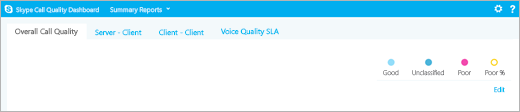
<style>
.page{position:relative;width:520px;height:112px;background:#ffffff}
.page>*{position:absolute;margin:0}
.t1{font:6.4px "SegoeUI";color:#beedff}
.t2{font:6.7px "SegoeUI";color:#beedff}
.t3{font:7.5px "SegoeUI";color:#737373}
.t4{font:7.5px "SegoeUI";color:#00bcf2}
.t5{font:6.7px "SegoeUI-Light";color:#737376}
.t6{font:6.7px "SegoeUI-Semilight";color:#00bcf2}
</style>
<div class="page">
<p class="t1" style="left:16px;top:7px;width:83px;height:7px">Skype Call Quality Dashboard</p>
<p class="t2" style="left:110px;top:7px;width:52px;height:7px">Summary Reports</p>
<p class="t3" style="left:15px;top:28px;width:63px;height:8px">Overall Call Quality</p>
<p class="t4" style="left:95px;top:29px;width:47px;height:7px">Server - Client</p>
<p class="t4" style="left:159px;top:29px;width:45px;height:7px">Client - Client</p>
<p class="t4" style="left:221px;top:28px;width:58px;height:8px">Voice Quality SLA</p>
<p class="t5" style="left:383px;top:69px;width:16px;height:7px">Good</p>
<p class="t5" style="left:412px;top:69px;width:32px;height:7px">Unclassified</p>
<p class="t5" style="left:458px;top:70px;width:13px;height:6px">Poor</p>
<p class="t5" style="left:485px;top:70px;width:20px;height:6px">Poor %</p>
<p class="t6" style="left:494px;top:86px;width:11px;height:7px">Edit</p>
</div>
